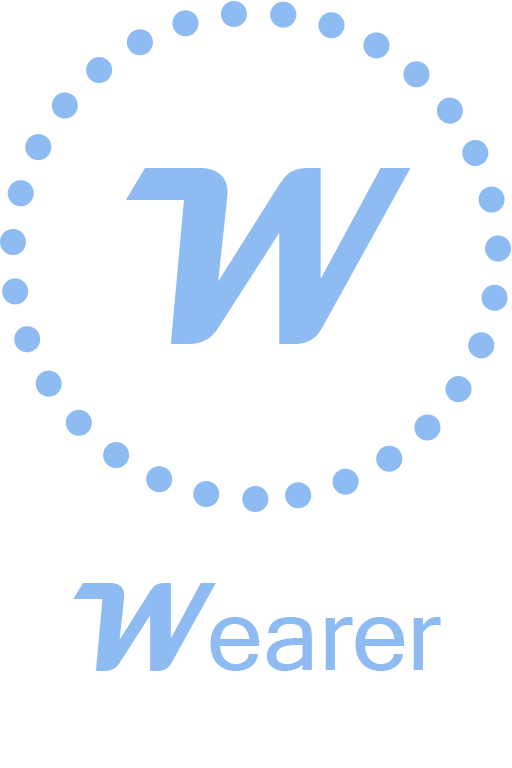
<style>
.page{position:relative;width:512px;height:768px;background:#ffffff}
.page>*{position:absolute;margin:0}
.t1{font:256px "Magneto-Bold";color:#8dbbf2}
.t2{font:128px "Magneto-Bold";color:#8dbbf2}
.t3{font:100px "MicrosoftSansSerif";color:#8dbbf2}
</style>
<div class="page">
<p class="t1" style="left:125px;top:168px;width:286px;height:176px">W</p>
<p class="t2" style="left:73px;top:583px;width:143px;height:88px">W</p>
<p class="t3" style="left:210px;top:617px;width:231px;height:54px">earer</p>
</div>
